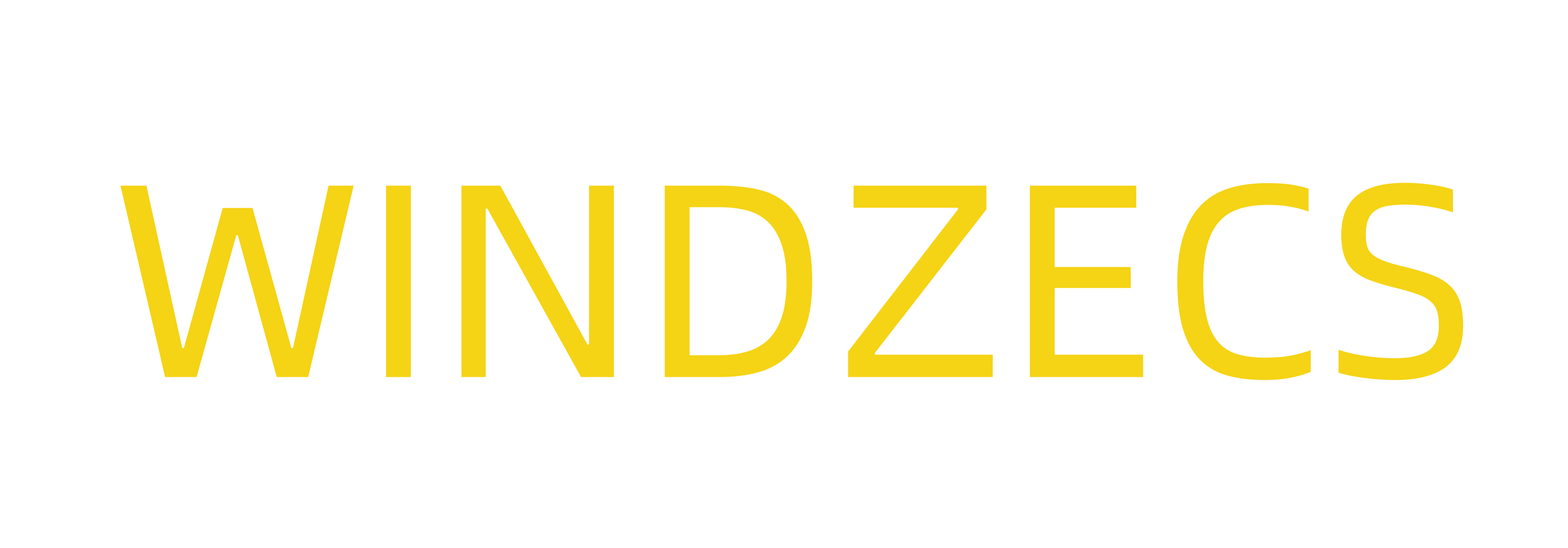
<style>
.page{position:relative;width:1568px;height:548px;background:#ffffff}
.page>*{position:absolute;margin:0}
.t1{font:275.6px "AlibabaPuHuiTi-Regular";color:#f5d315}
</style>
<div class="page">
<p class="t1" style="left:120px;top:183px;width:1343px;height:197px">WINDZECS</p>
</div>
